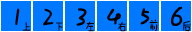
<style>
.page{position:relative;width:192px;height:32px;background:#0078ff}
.page>*{position:absolute;margin:0}
.t1{font:36px "FZMWJW--GB1-0";letter-spacing:-0.1em;color:#000000}
.t2{font:12px "FZMWJW--GB1-0";letter-spacing:-0.1em;color:#000a23}
.t3{font:12px "FZMWJW--GB1-0";letter-spacing:-0.1em;color:#000000}
</style>
<div class="page">
<p class="t1" style="left:171px;top:6px;width:12px;height:20px">6</p>
<p class="t1" style="left:15px;top:8px;width:5px;height:17px">1</p>
<p class="t1" style="left:43px;top:8px;width:11px;height:18px">2</p>
<p class="t1" style="left:76px;top:8px;width:11px;height:18px">3</p>
<p class="t1" style="left:107px;top:8px;width:14px;height:17px">4</p>
<p class="t1" style="left:140px;top:8px;width:10px;height:17px">5</p>
<p class="t2" style="left:22px;top:22px;width:9px;height:9px">上</p>
<p class="t3" style="left:56px;top:22px;width:7px;height:9px">下</p>
<p class="t3" style="left:86px;top:21px;width:8px;height:11px">左</p>
<p class="t3" style="left:118px;top:21px;width:8px;height:11px">右</p>
<p class="t3" style="left:149px;top:19px;width:9px;height:12px">前</p>
<p class="t3" style="left:183px;top:21px;width:8px;height:11px">后</p>
</div>
